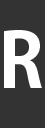
<style>
.page{position:relative;width:45px;height:128px;background:#333333}
.page>*{position:absolute;margin:0}
.t1{font:75px "AdobeGothicStd-Bold";color:#ffffff}
</style>
<div class="page">
<p class="t1" style="left:4px;top:30px;width:38px;height:58px">R</p>
</div>
